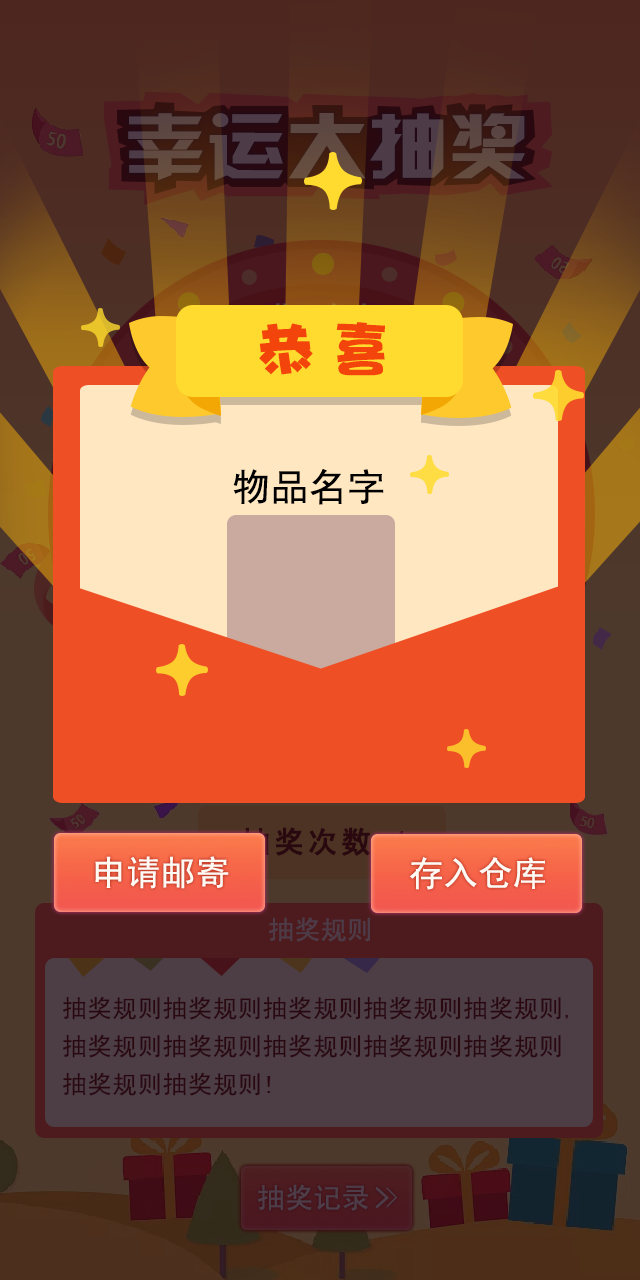
<style>
.page{position:relative;width:640px;height:1280px}
.page>*{position:absolute;margin:0}
.t1{font:71.5px "JLinXin";color:#594443;scale:1.13 1}
.t2{font:57.8px "DFPHaiBaoW12";letter-spacing:0.3em;color:#f2440b}
.t3{font:38.5px "SimHei";color:#000000}
.t4{font:29.8px "SimHei";letter-spacing:0.1em;font-weight:bold}
.t5{font:34.6px "SimHei";color:#fef9f3}
.t6{font:26.3px "SimHei";color:#4d3c47}
.t7{font:25.1px/38.2px "SimHei";color:#29090f}
.t8{font:28.2px "SimHei";color:#4d3d49}
.t9{font:28.2px "SimHei";color:#4d3c47;font-weight:bold}
.t10{font:28.2px "SimSun";color:#4d3c47}
</style>
<div class="page">
<p class="t1" style="left:128px;top:113px;width:397px;height:68px">幸运大抽奖</p>
<p class="t2" style="left:259px;top:322px;width:126px;height:54px">恭喜</p>
<p class="t3" style="left:233px;top:468px;width:151px;height:37px">物品名字</p>
<p class="t4" style="left:241px;top:827px;width:162px;height:29px">抽奖次数:1</p>
<p class="t5" style="left:95px;top:856px;width:134px;height:33px">申请邮寄</p>
<p class="t5" style="left:409px;top:857px;width:136px;height:33px">存入仓库</p>
<p class="t6" style="left:269px;top:917px;width:101px;height:25px">抽奖规则</p>
<p class="t7" style="left:63px;top:996px;width:505px;height:100px">抽奖规则抽奖规则抽奖规则抽奖规则抽奖规则,<br>抽奖规则抽奖规则抽奖规则抽奖规则抽奖规则<br>抽奖规则抽奖规则!</p>
<p class="t8" style="left:258px;top:1184px;width:110px;height:27px">抽奖记录</p>
<p class="t9" style="left:375px;top:1187px;width:14px;height:22px">&gt;</p>
<p class="t10" style="left:386px;top:1187px;width:11px;height:21px">&gt;</p>
</div>
